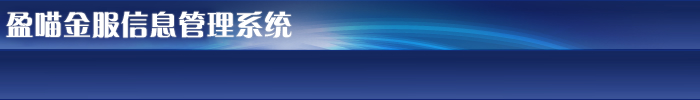
<style>
.page{position:relative;width:700px;height:100px}
.page>*{position:absolute;margin:0}
.t1{font:27.5px "FZCQJW--GB1-0";letter-spacing:0.045em;color:#ffffff}
</style>
<div class="page">
<p class="t1" style="left:6px;top:11px;width:286px;height:27px">盈喵金服信息管理系统</p>
</div>
